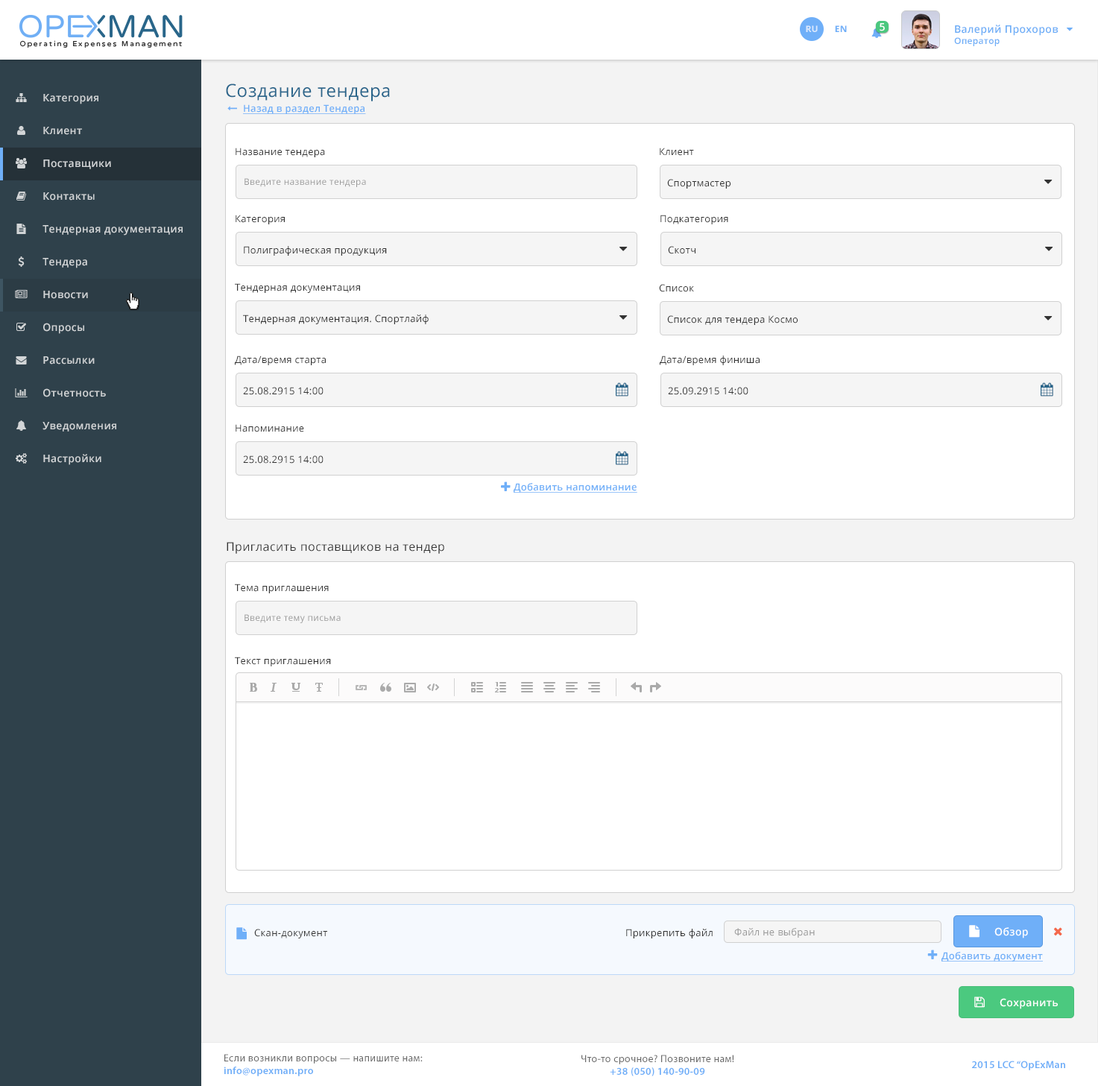
<style>
.page{position:relative;width:1098px;height:1086px;background:#ffffff}
.page>*{position:absolute;margin:0}
.t1{font:8.9px "OpenSans-Bold";letter-spacing:0.025em;color:#dbe9fd;text-transform:uppercase}
.t2{font:8.9px "OpenSans-Bold";letter-spacing:0.025em;color:#6faff8;text-transform:uppercase}
.t3{font:10.4px "OpenSans-Semibold";letter-spacing:0.025em;color:#ffffff}
.t4{font:10.4px "OpenSans-Semibold";letter-spacing:0.025em;color:#6eaef7}
.t5{font:8.9px "OpenSans-Semibold";letter-spacing:0.025em;color:#6eaef7}
.t6{font:17.9px "OpenSans";letter-spacing:0.025em;color:#29658b}
.t7{font:10.4px "OpenSans-Semibold";letter-spacing:0.025em;color:#d2d5d7}
.t8{font:9.7px "OpenSans-Semibold";letter-spacing:0.025em;color:#6faff8;text-decoration:underline}
.t9{font:9.7px "OpenSans";letter-spacing:0.025em;color:#333333}
.t10{font:8.9px "OpenSans";letter-spacing:0.025em;color:#999999}
.t11{font:11.9px "OpenSans";letter-spacing:0.025em;color:#333333}
.t12{font:9.7px "OpenSans";letter-spacing:0.025em;color:#999999}
.t13{font:10.4px "MyriadPro-Regular";letter-spacing:0.025em;color:#696969}
.t14{font:10.4px "MyriadPro-Semibold";letter-spacing:0.025em;color:#6eaef8}
</style>
<div class="page">
<p class="t1" style="left:806px;top:25px;width:12px;height:7px">Ru</p>
<p class="t2" style="left:835px;top:25px;width:12px;height:7px">EN</p>
<p class="t3" style="left:880px;top:23px;width:5px;height:8px">5</p>
<p class="t4" style="left:954px;top:25px;width:104px;height:21px">Валерий Прохоров<br><span class="t5">Оператор</span></p>
<p class="t6" style="left:226px;top:83px;width:164px;height:18px">Создание тендера</p>
<p class="t7" style="left:43px;top:94px;width:55px;height:10px">Категория</p>
<p class="t8" style="left:243px;top:104px;width:123px;height:10px">Назад в раздел Тендера</p>
<p class="t7" style="left:43px;top:127px;width:39px;height:8px">Клиент</p>
<p class="t9" style="left:236px;top:148px;width:89px;height:9px">Название тендера</p>
<p class="t9" style="left:660px;top:148px;width:34px;height:8px">Клиент</p>
<p class="t7" style="left:43px;top:160px;width:68px;height:9px">Поставщики</p>
<p class="t10" style="left:244px;top:178px;width:122px;height:9px">Введите название тендера</p>
<p class="t9" style="left:667px;top:179px;width:63px;height:10px">Спортмастер</p>
<p class="t7" style="left:43px;top:192px;width:52px;height:9px">Контакты</p>
<p class="t9" style="left:236px;top:215px;width:49px;height:9px">Категория</p>
<p class="t9" style="left:660px;top:215px;width:68px;height:9px">Подкатегория</p>
<p class="t7" style="left:42px;top:225px;width:141px;height:11px">Тендерная документация</p>
<p class="t9" style="left:244px;top:246px;width:143px;height:10px">Полиграфическая продукция</p>
<p class="t9" style="left:668px;top:246px;width:27px;height:8px">Скотч</p>
<p class="t7" style="left:42px;top:258px;width:45px;height:10px">Тендера</p>
<p class="t7" style="left:43px;top:291px;width:45px;height:8px">Новости</p>
<p class="t9" style="left:235px;top:283px;width:125px;height:10px">Тендерная документация</p>
<p class="t9" style="left:659px;top:284px;width:35px;height:8px">Список</p>
<p class="t9" style="left:243px;top:315px;width:186px;height:9px">Тендерная документация. Спортлайф</p>
<p class="t9" style="left:667px;top:315px;width:131px;height:10px">Список для тендера Космо</p>
<p class="t7" style="left:43px;top:323px;width:41px;height:11px">Опросы</p>
<p class="t7" style="left:43px;top:356px;width:52px;height:8px">Рассылки</p>
<p class="t9" style="left:235px;top:356px;width:91px;height:9px">Дата/время старта</p>
<p class="t9" style="left:660px;top:356px;width:100px;height:9px">Дата/время финиша</p>
<p class="t7" style="left:43px;top:388px;width:63px;height:9px">Отчетность</p>
<p class="t9" style="left:243px;top:387px;width:81px;height:8px">25.08.2915 14:00</p>
<p class="t9" style="left:668px;top:387px;width:80px;height:8px">25.09.2915 14:00</p>
<p class="t7" style="left:42px;top:422px;width:74px;height:10px">Уведомления</p>
<p class="t9" style="left:236px;top:424px;width:68px;height:8px">Напоминание</p>
<p class="t7" style="left:43px;top:454px;width:58px;height:11px">Настройки</p>
<p class="t9" style="left:243px;top:455px;width:81px;height:9px">25.08.2915 14:00</p>
<p class="t8" style="left:514px;top:483px;width:123px;height:10px">Добавить напоминание</p>
<p class="t11" style="left:227px;top:542px;width:217px;height:12px">Пригласить поставщиков на тендер</p>
<p class="t9" style="left:235px;top:584px;width:94px;height:9px">Тема приглашения</p>
<p class="t10" style="left:244px;top:614px;width:97px;height:9px">Введите тему письма</p>
<p class="t9" style="left:235px;top:657px;width:96px;height:9px">Текст приглашения</p>
<p class="t9" style="left:254px;top:929px;width:73px;height:9px">Скан-документ</p>
<p class="t9" style="left:626px;top:929px;width:87px;height:9px">Прикрепить файл</p>
<p class="t12" style="left:734px;top:928px;width:81px;height:10px">Файл не выбран</p>
<p class="t3" style="left:994px;top:927px;width:34px;height:11px">Обзор</p>
<p class="t8" style="left:941px;top:952px;width:102px;height:10px">Добавить документ</p>
<p class="t3" style="left:1000px;top:998px;width:58px;height:11px">Сохранить</p>
<p class="t13" style="left:224px;top:1054px;width:199px;height:22px">Если возникли вопросы — напишите нам:<br><span class="t14">info@opexman.pro</span></p>
<p class="t13" style="left:581px;top:1055px;width:153px;height:21px;text-align:center">Что-то срочное? Позвоните нам!<br><span class="t14">+38 (050) 140-90-09</span></p>
<p class="t14" style="left:972px;top:1061px;width:93px;height:9px">2015 LCC “OpExMan</p>
</div>
